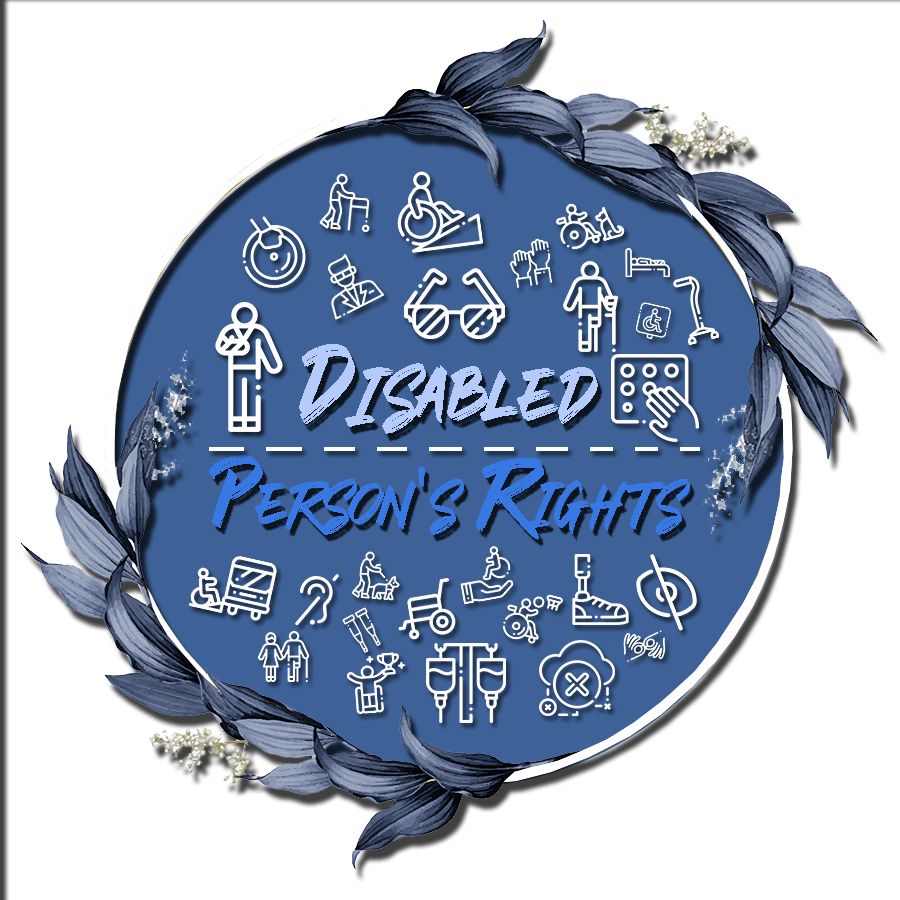
<style>
.page{position:relative;width:900px;height:900px;background:#ffffff}
.page>*{position:absolute;margin:0}
.t1{font:147px "RODAMAS";color:#b4cbfb}
.t2{font:207px "RODAMAS";color:#b4cbfb}
.t3{font:147px "RODAMAS";color:#1d72ff}
.t4{font:97px "RODAMAS";color:#1d72ff}
.t5{font:97px "WRTishKid";color:#1d72ff}
.t6{font:117px "RODAMAS";color:#3878e3}
.t7{font:177px "RODAMAS";color:#3878e3}
.t8{font:117px "WRTishKid";color:#3878e3}
</style>
<div class="page">
<p class="t1" style="left:299px;top:344px;width:299px;height:90px;text-align:center"><span class="t2">D</span>isabled <br><span class="t3">P</span><span class="t4">erson</span><span class="t5">'</span><span class="t4">s </span><span class="t3">R</span><span class="t4">ights</span></p>
<p class="t6" style="left:209px;top:455px;width:481px;height:85px"><span class="t7">P</span>erson<span class="t8">'</span>s <span class="t7">R</span>ights</p>
</div>
